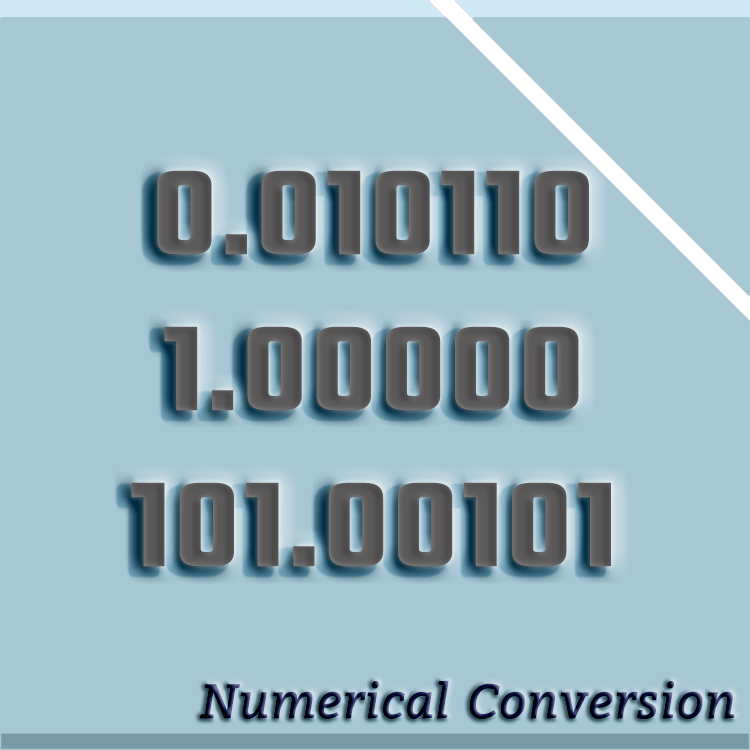
<style>
.page{position:relative;width:750px;height:750px;background:#a8c7d5}
.page>*{position:absolute;margin:0}
.t1{font:130px "Teko-SemiBold";color:#5a5858;font-weight:bold;scale:1.09 1}
.t2{font:48px "Bitter-Italic";font-weight:bold}
</style>
<div class="page">
<p class="t1" style="left:131px;top:170px;width:480px;height:397px;text-align:center">0.010110<br>1.00000<br>101.00101</p>
<p class="t2" style="left:200px;top:680px;width:535px;height:39px">Numerical Conversion</p>
</div>
